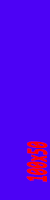
<style>
.page{position:relative;width:50px;height:200px;background:#4c02f5}
.page>*{position:absolute;margin:0}
.t1{font:29.7px "Consolas-Bold";color:#ff0000;font-weight:bold;font-style:italic;scale:0.39 1}
</style>
<div class="page">
<p class="t1" style="left:26px;top:141px;width:22px;height:41px;rotate:-89deg">100x50</p>
</div>
